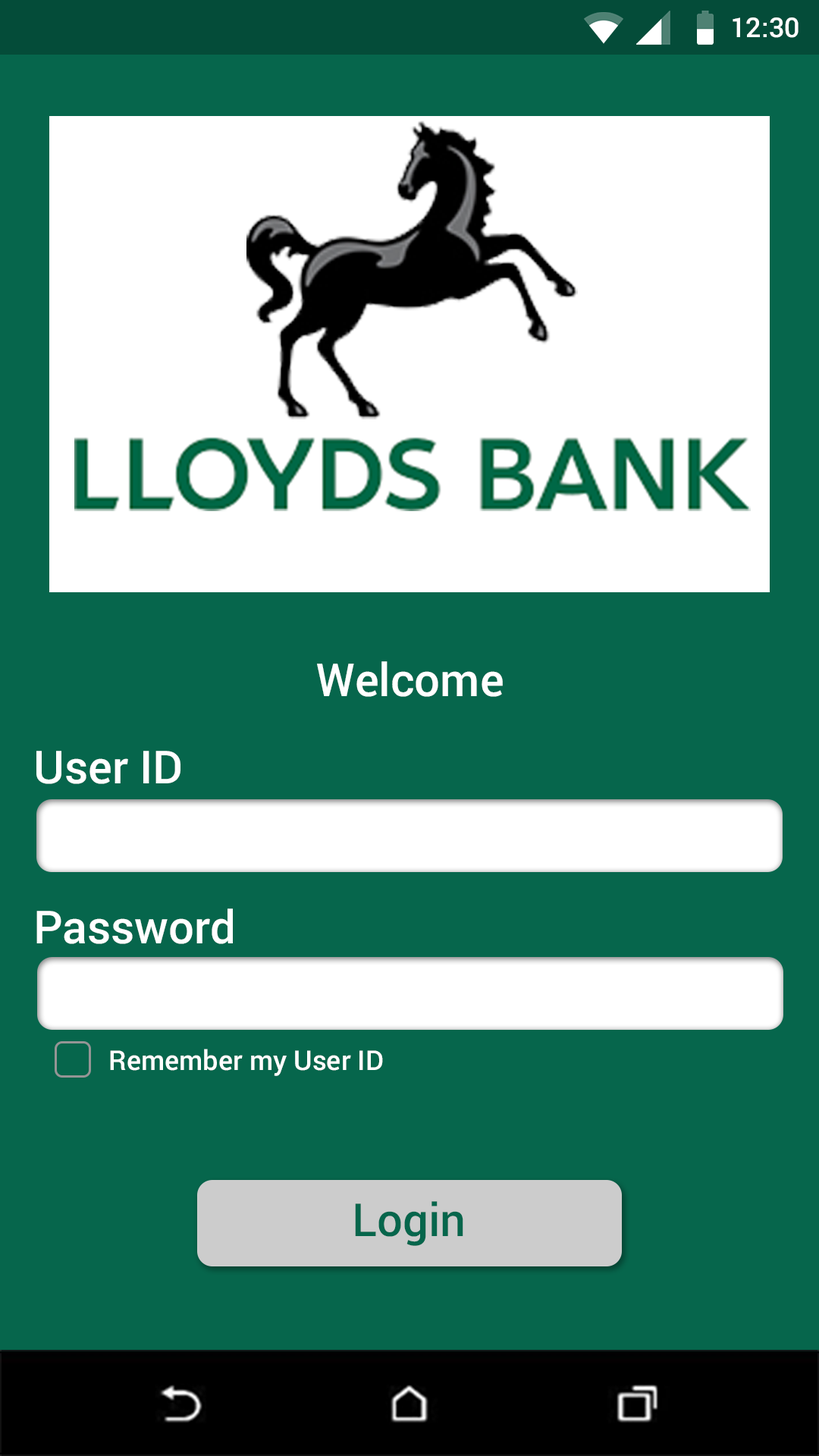
<style>
.page{position:relative;width:819px;height:1456px;background:#06664c}
.page>*{position:absolute;margin:0}
.t1{font:27.3px "Roboto-Medium";color:#ffffff}
.t2{font:45.5px "Roboto-Medium";color:#ffffff}
.t3{font:45.5px "Roboto-Medium";color:#06664c}
</style>
<div class="page">
<p class="t1" style="left:733px;top:17px;width:66px;height:21px">12:30</p>
<p class="t2" style="left:317px;top:661px;width:186px;height:36px">Welcome</p>
<p class="t2" style="left:36px;top:751px;width:144px;height:33px">User ID</p>
<p class="t2" style="left:36px;top:908px;width:197px;height:36px">Password</p>
<p class="t1" style="left:110px;top:1049px;width:273px;height:27px">Remember my User ID</p>
<p class="t3" style="left:355px;top:1201px;width:108px;height:45px">Login</p>
</div>
